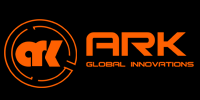
<style>
.page{position:relative;width:200px;height:100px;background:#000000}
.page>*{position:absolute;margin:0}
.t1{font:49.6px "Bauhaus93";color:#fe6000;scale:1.04 1}
.t2{font:51.7px "Bauhaus93";color:#fe6000;scale:1.04 1}
.t3{font:9.1px "Bitsumishi";color:#fe6000;scale:1.14 1}
.t4{font:45.5px "Bitsumishi";color:#fe6000;scale:1.14 1}
</style>
<div class="page">
<p class="t1" style="left:15px;top:41px;width:27px;height:26px">a</p>
<p class="t2" style="left:32px;top:40px;width:15px;height:26px">r</p>
<p class="t3" style="left:86px;top:32px;width:108px;height:35px"><span class="t4">ARK <br></span>Global innovations</p>
</div>
